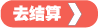
<style>
.page{position:relative;width:98px;height:28px;background:#f45f53}
.page>*{position:absolute;margin:0}
.t1{font:16.2px "FZCCHJW--GB1-0";color:#ffffff}
</style>
<div class="page">
<p class="t1" style="left:13px;top:5px;width:48px;height:16px">去结算</p>
</div>
